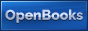
<style>
.page{position:relative;width:88px;height:31px}
.page>*{position:absolute;margin:0}
.t1{font:14px "Raleway-ExtraBold"}
</style>
<div class="page">
<p class="t1" style="left:5px;top:9px;width:78px;height:14px">OpenBooks</p>
</div>
